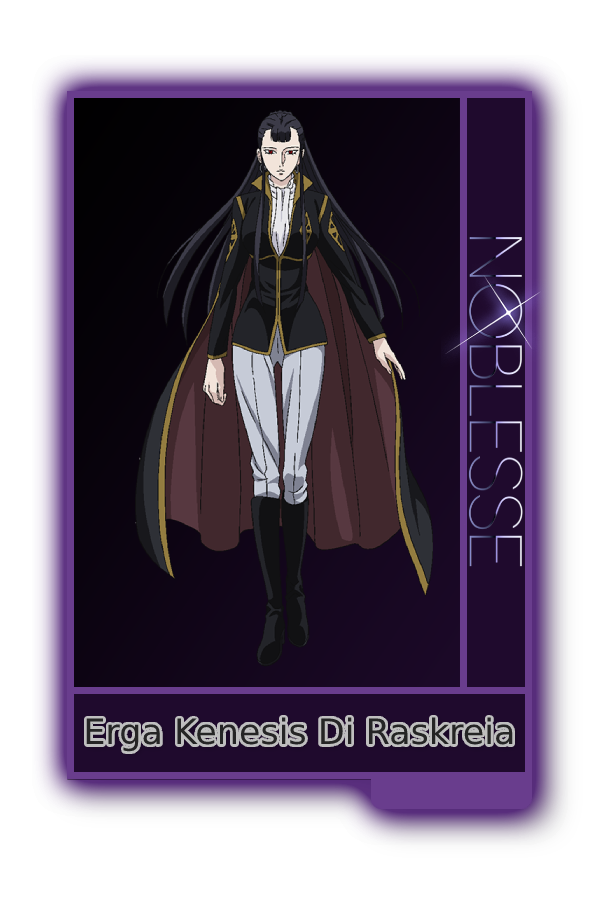
<style>
.page{position:relative;width:600px;height:900px;background:#ffffff}
.page>*{position:absolute;margin:0}
.t1{font:35px "CoolveticaRg-Regular";color:#252525}
</style>
<div class="page">
<p class="t1" style="left:86px;top:717px;width:427px;height:35px">Erga Kenesis Di Raskreia</p>
</div>
